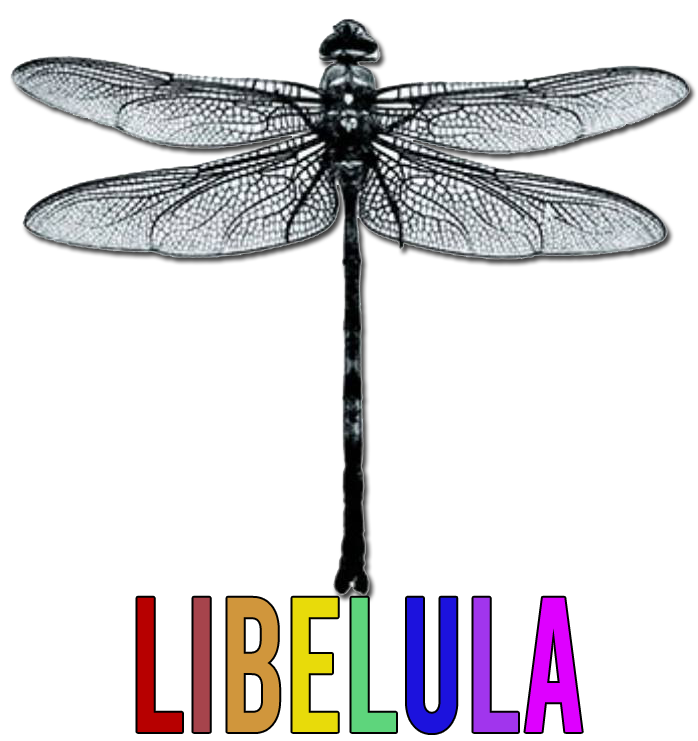
<style>
.page{position:relative;width:698px;height:741px;background:#ffffff}
.page>*{position:absolute;margin:0}
.t1{font:192px "Bebas-Regular";color:#b70000;scale:0.78 1}
.t2{font:192px "Bebas-Regular";color:#a6444c;scale:0.78 1}
.t3{font:192px "Bebas-Regular";color:#d0963c;scale:0.78 1}
.t4{font:192px "Bebas-Regular";color:#e8db0a;scale:0.78 1}
.t5{font:192px "Bebas-Regular";color:#5ed57c;scale:0.78 1}
.t6{font:192px "Bebas-Regular";color:#1c12dd;scale:0.78 1}
.t7{font:192px "Bebas-Regular";color:#a135ed;scale:0.78 1}
.t8{font:192px "Bebas-Regular";color:#de00ff;scale:0.78 1}
</style>
<div class="page">
<p class="t1" style="left:137px;top:597px;width:445px;height:136px">L<span class="t2">i</span><span class="t3">b</span><span class="t4">e</span><span class="t5">l</span><span class="t6">u</span><span class="t7">l</span><span class="t8">a</span></p>
</div>
